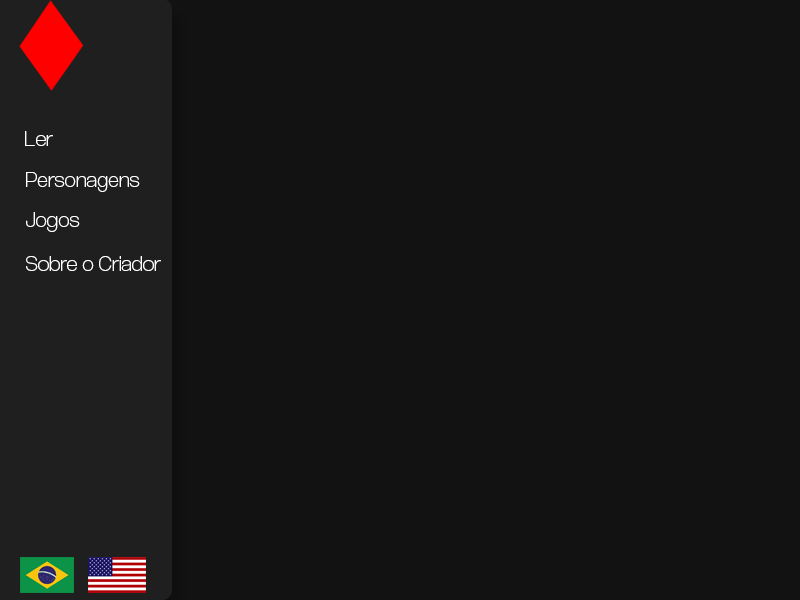
<style>
.page{position:relative;width:800px;height:600px;background:#121212}
.page>*{position:absolute;margin:0}
.t1{font:22px "CoolveticaEl-Regular";color:#ffffff}
</style>
<div class="page">
<p class="t1" style="left:25px;top:131px;width:28px;height:15px">Ler</p>
<p class="t1" style="left:26px;top:172px;width:114px;height:20px">Personagens</p>
<p class="t1" style="left:26px;top:212px;width:54px;height:20px">Jogos</p>
<p class="t1" style="left:26px;top:256px;width:135px;height:15px">Sobre o Criador</p>
</div>
